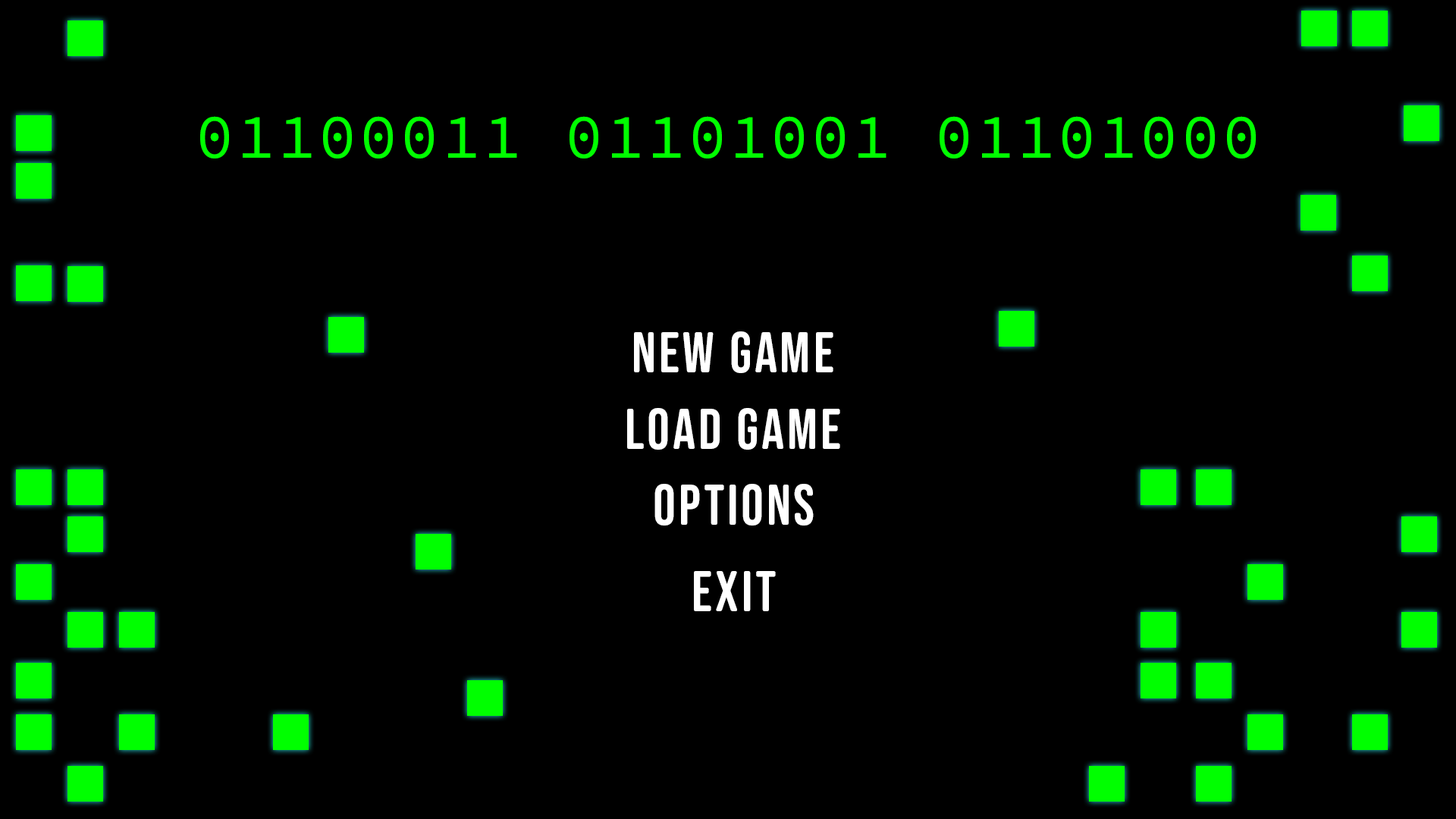
<style>
.page{position:relative;width:1456px;height:819px;background:#000000}
.page>*{position:absolute;margin:0}
.t1{font:63.2px "SourceCodePro-Regular";letter-spacing:0.05em;color:#00ff00}
.t2{font:56.9px "BebasNeueSemiRounded-Regular";letter-spacing:0.05em;color:#ffffff}
</style>
<div class="page">
<p class="t1" style="left:200px;top:116px;width:1056px;height:42px">01100011 01101001 01101000</p>
<p class="t2" style="left:634px;top:331px;width:199px;height:42px">New Game</p>
<p class="t2" style="left:627px;top:408px;width:213px;height:42px">Load Game</p>
<p class="t2" style="left:654px;top:484px;width:160px;height:42px">Options</p>
<p class="t2" style="left:694px;top:571px;width:82px;height:40px">Exit</p>
</div>
